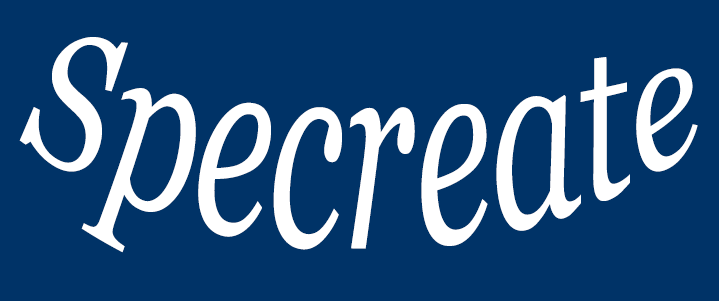
<style>
.page{position:relative;width:719px;height:301px;background:#003367}
.page>*{position:absolute;margin:0}
.t1{font:152.6px "Georgia-Italic";color:#ffffff}
</style>
<div class="page">
<p class="t1" style="left:19px;top:37px;width:679px;height:216px">Specreate</p>
</div>
